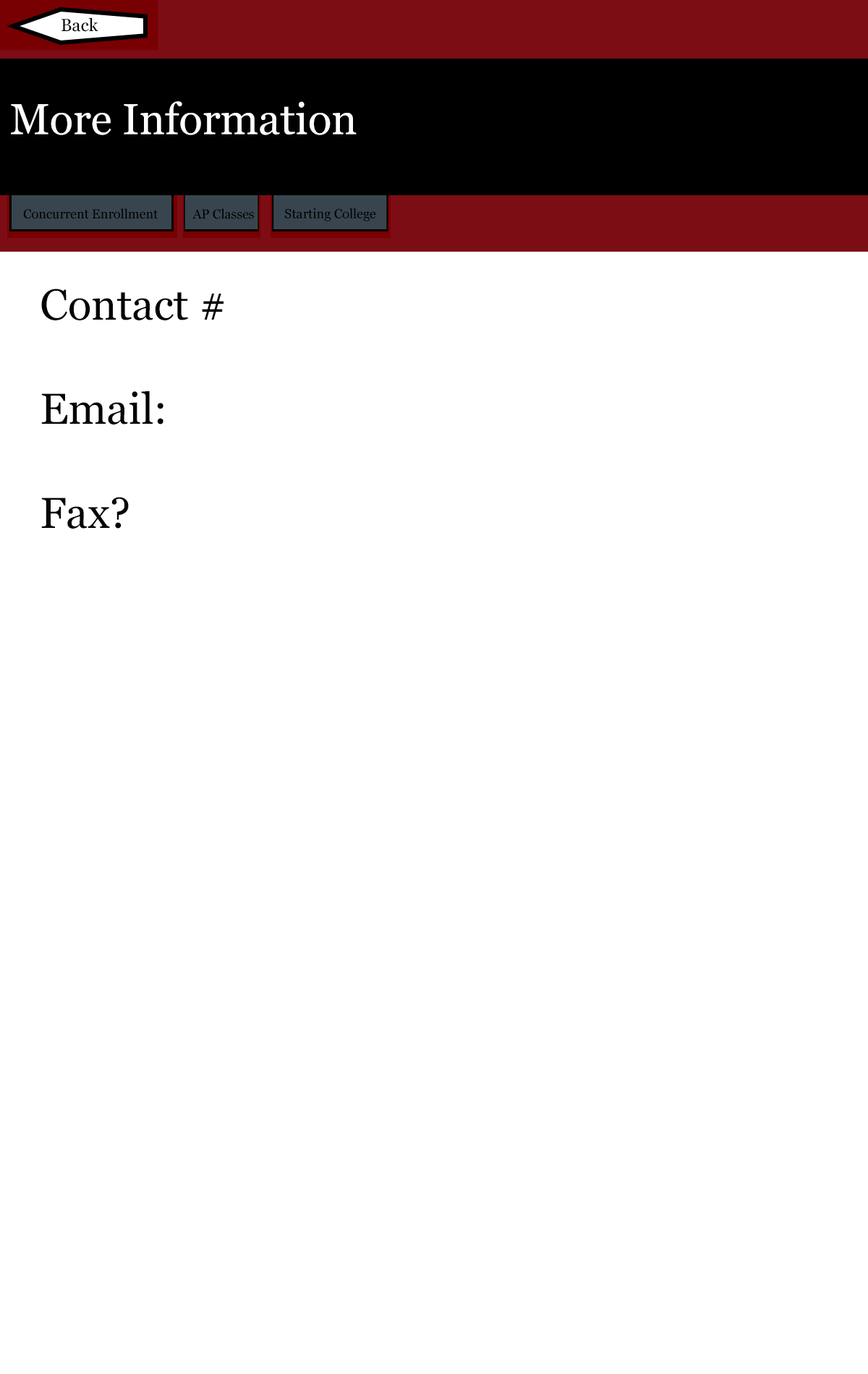
<style>
.page{position:relative;width:868px;height:1374px;background:#ffffff}
.page>*{position:absolute;margin:0}
.t1{font:43.4px "Georgia";color:#ffffff}
.t2{font:13px "Georgia";color:#000000}
.t3{font:43.4px "Georgia";color:#040404}
</style>
<div class="page">
<p class="t1" style="left:11px;top:101px;width:346px;height:34px">More Information</p>
<p class="t2" style="left:23px;top:208px;width:135px;height:11px">Concurrent Enrollment</p>
<p class="t2" style="left:192px;top:208px;width:62px;height:11px">AP Classes</p>
<p class="t2" style="left:285px;top:208px;width:91px;height:13px">Starting College</p>
<p class="t3" style="left:41px;top:289px;width:182px;height:240px">Contact #<br><br>Email:<br><br>Fax?</p>
</div>
